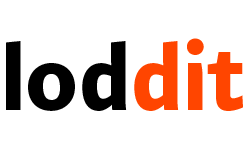
<style>
.page{position:relative;width:250px;height:150px;background:#ffffff}
.page>*{position:absolute;margin:0}
.t1{font:96.6px "PlusSansExtraBold-Regular";color:#000000}
.t2{font:96.6px "PlusSansExtraBold-Regular";color:#ff4500}
</style>
<div class="page">
<p class="t1" style="left:6px;top:38px;width:237px;height:73px">lod<span class="t2">dit</span></p>
</div>
